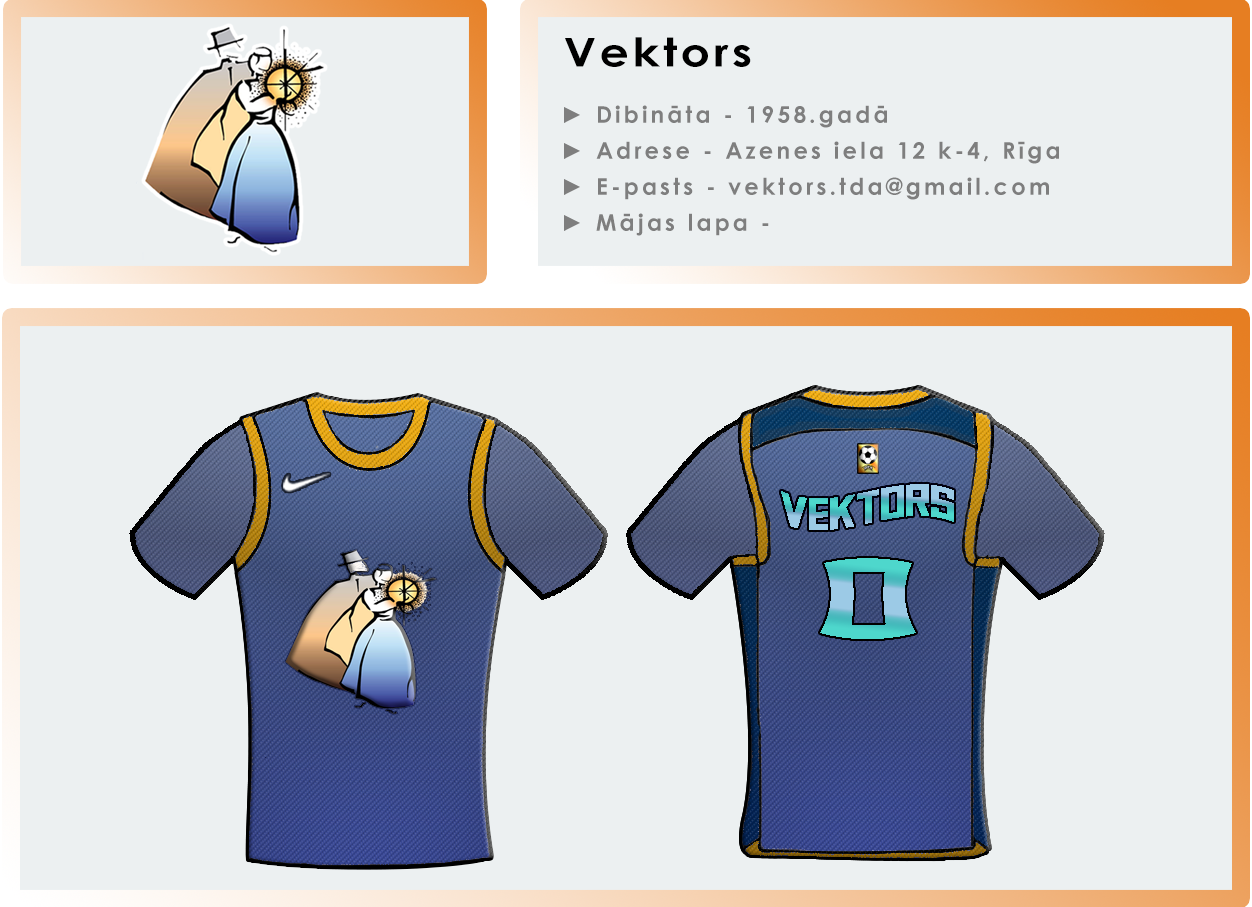
<style>
.page{position:relative;width:1252px;height:907px;background:#ecf0f1}
.page>*{position:absolute;margin:0}
.t1{font:39.7px "CenturyGothic-Bold";letter-spacing:0.08em;color:#000000;scale:1.16 1}
.t2{font:23.1px/36px "CenturyGothic-Bold";letter-spacing:0.14em;color:#7e7e7e}
.t3{font:43.9px "NBAMilwaukeeBucks2015";scale:1.42 1}
.t4{font:88.7px "NBAMilwaukeeBucks2015";scale:3.33 1}
</style>
<div class="page">
<p class="t1" style="left:565px;top:37px;width:186px;height:30px">Vektors</p>
<p class="t2" style="left:564px;top:105px;width:495px;height:131px">► Dibināta - 1958.gadā<br>► Adrese - Azenes iela 12 k-4, Rīga<br>► E-pasts - vektors.tda@gmail.com<br>► Mājas lapa -</p>
<p class="t3" style="left:781px;top:484px;width:173px;height:46px">Vektors</p>
<p class="t4" style="left:820px;top:558px;width:96px;height:81px">0</p>
</div>
